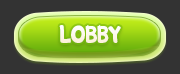
<style>
.page{position:relative;width:180px;height:74px;background:#333333}
.page>*{position:absolute;margin:0}
.t1{font:25px "Cartwheel";color:#ffffff}
</style>
<div class="page">
<p class="t1" style="left:59px;top:25px;width:62px;height:18px">lobby</p>
</div>
